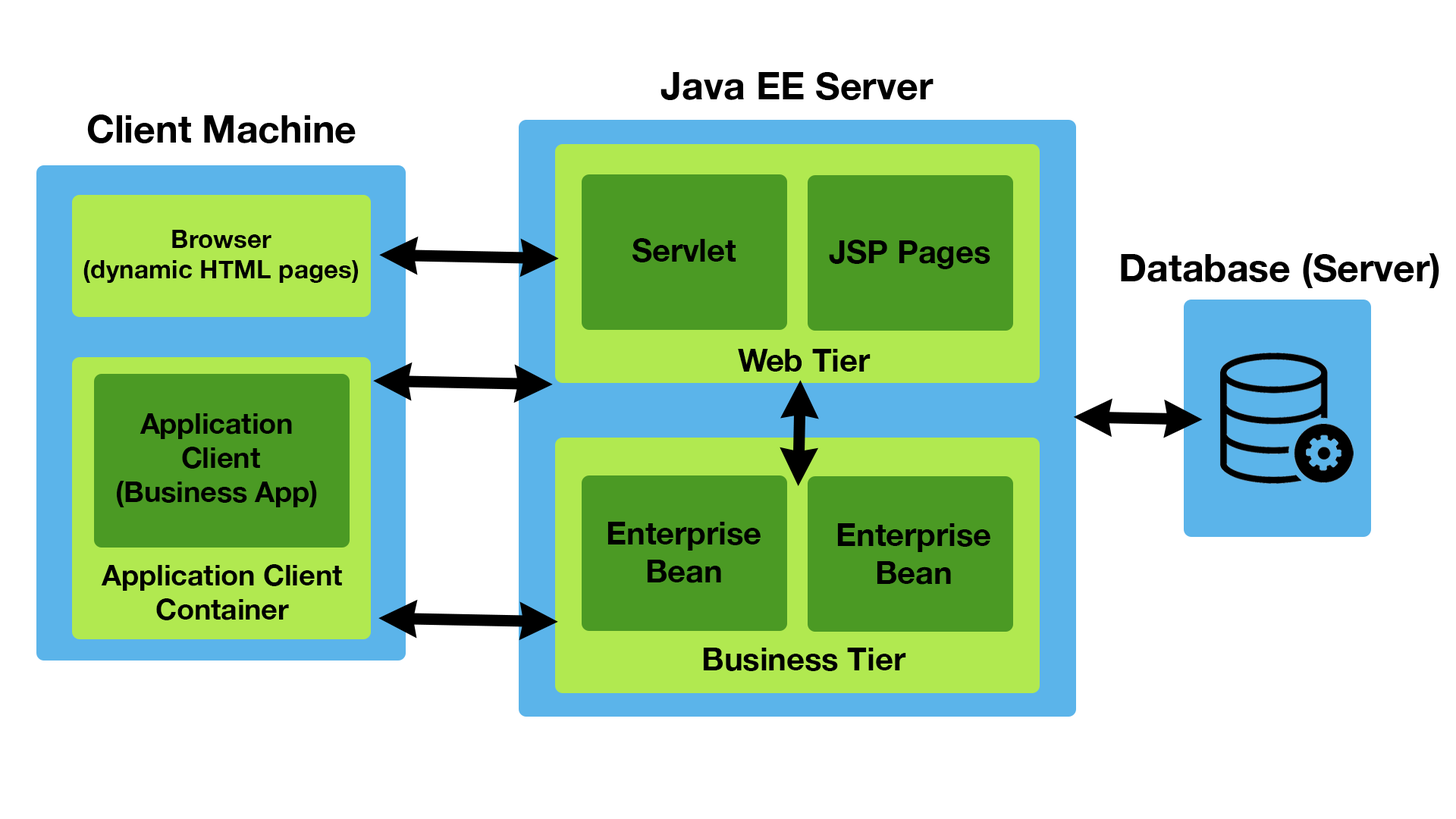
<style>
.page{position:relative;width:1456px;height:819px;background:#ffffff}
.page>*{position:absolute;margin:0}
.t1{font:37.9px "HelveticaNeue-Bold";color:#000000}
.t2{font:25.3px "HelveticaNeue-Bold";color:#000000}
.t3{font:31.6px "HelveticaNeue-Bold";color:#000000}
.t4{font:28.4px "HelveticaNeue-Bold";color:#000000}
</style>
<div class="page">
<p class="t1" style="left:660px;top:72px;width:273px;height:28px">Java EE Server</p>
<p class="t1" style="left:87px;top:115px;width:269px;height:28px">Client Machine</p>
<p class="t2" style="left:83px;top:230px;width:275px;height:53px;text-align:center">Browser<br>(dynamic HTML pages)</p>
<p class="t3" style="left:632px;top:238px;width:104px;height:24px">Servlet</p>
<p class="t3" style="left:829px;top:240px;width:161px;height:29px">JSP Pages</p>
<p class="t1" style="left:1121px;top:253px;width:318px;height:35px">Database (Server)</p>
<p class="t3" style="left:738px;top:349px;width:133px;height:23px">Web Tier</p>
<p class="t4" style="left:117px;top:413px;width:200px;height:94px;text-align:center">Application <br>Client<br>(Business App)</p>
<p class="t3" style="left:607px;top:522px;width:154px;height:61px;text-align:center">Enterprise<br>Bean</p>
<p class="t3" style="left:837px;top:523px;width:153px;height:62px;text-align:center">Enterprise<br>Bean</p>
<p class="t4" style="left:101px;top:564px;width:241px;height:56px;text-align:center">Application Client<br>Container</p>
<p class="t3" style="left:703px;top:648px;width:203px;height:23px">Business Tier</p>
</div>
